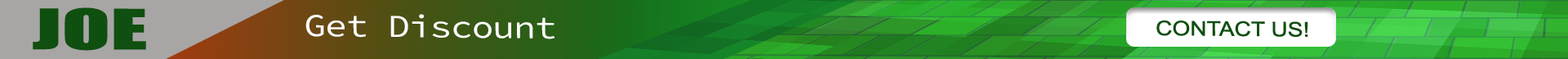
<style>
.page{position:relative;width:1568px;height:59px}
.page>*{position:absolute;margin:0}
.t1{font:51.1px "Impact";letter-spacing:-0.025em;color:#0f4f0f;font-weight:bold;scale:1.74 1}
.t2{font:31.9px "SourceCodeVariable-Roman";letter-spacing:-0.025em;color:#ffffff;font-weight:bold;scale:1.14 1}
.t3{font:20.1px "ArialMT";letter-spacing:-0.025em;color:#0f4f0f;font-weight:bold;scale:1.14 1}
</style>
<div class="page">
<p class="t1" style="left:33px;top:7px;width:113px;height:44px">JOE</p>
<p class="t2" style="left:305px;top:14px;width:250px;height:25px;rotate:1deg">Get Discount</p>
<p class="t3" style="left:1156px;top:20px;width:152px;height:17px;rotate:1deg">CONTACT US!</p>
</div>
